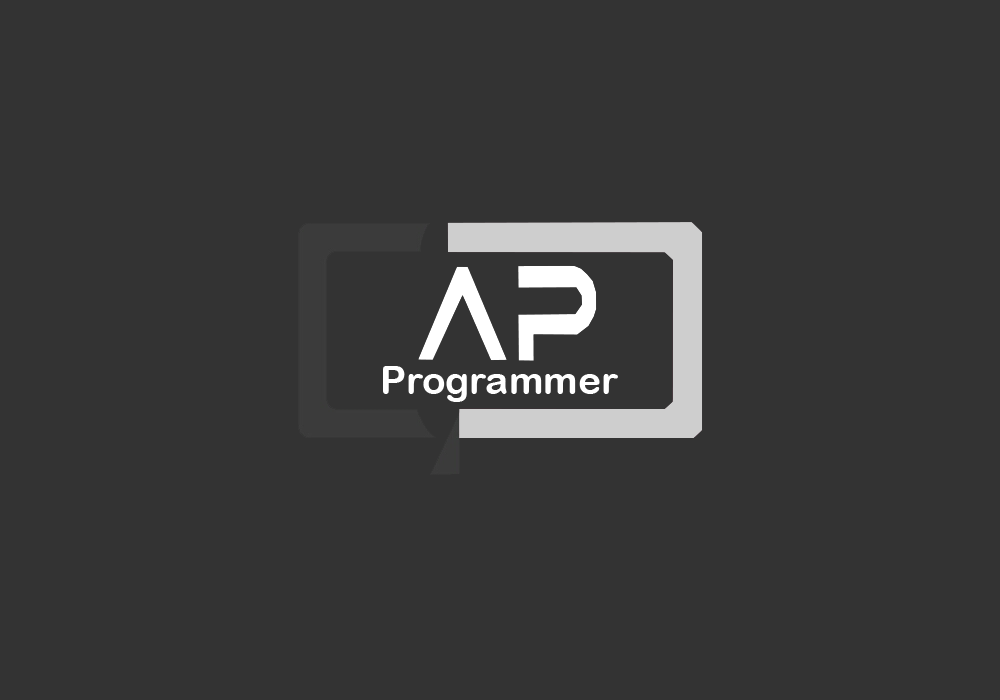
<style>
.page{position:relative;width:1000px;height:700px;background:#333333}
.page>*{position:absolute;margin:0}
.t1{font:39.1px "ArialRoundedMTBold";color:#ffffff}
</style>
<div class="page">
<p class="t1" style="left:383px;top:366px;width:235px;height:36px">Programmer</p>
</div>
